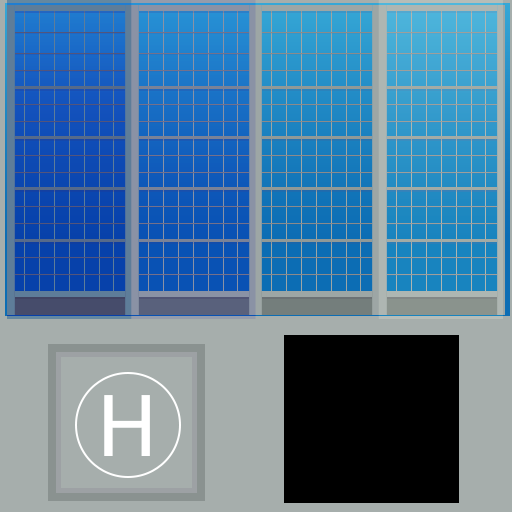
<style>
.page{position:relative;width:512px;height:512px;background:#a6aeac}
.page>*{position:absolute;margin:0}
.t1{font:90.9px "MS-UIGothic";letter-spacing:-0.025em;color:#ffffff}
</style>
<div class="page">
<p class="t1" style="left:104px;top:395px;width:46px;height:61px">H</p>
</div>
